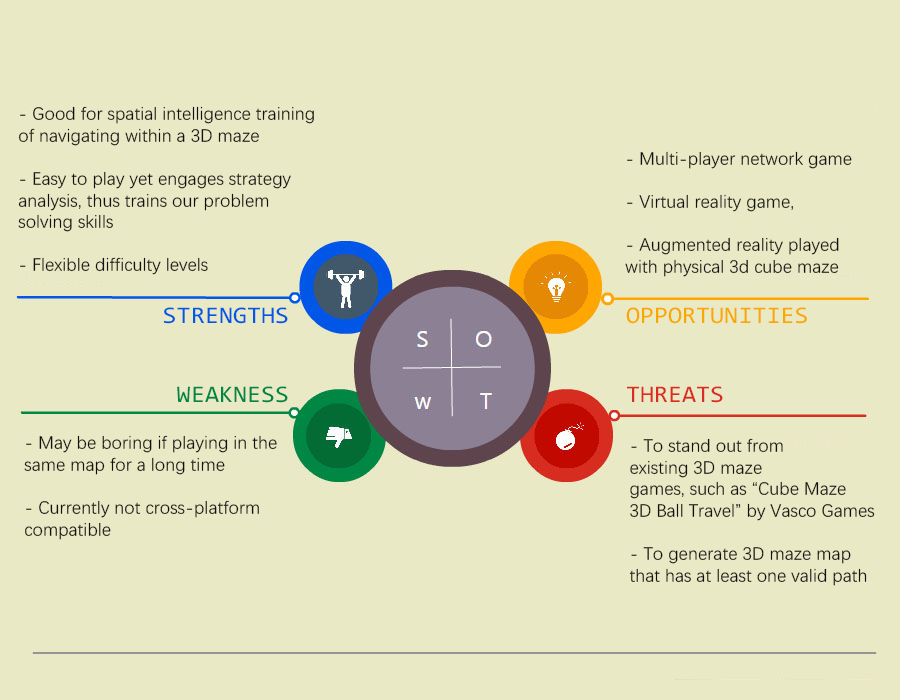
<style>
.page{position:relative;width:900px;height:700px;background:#e9e9c5}
.page>*{position:absolute;margin:0}
.t1{font:18px "DengXian-Regular";color:#111111}
.t2{font:24px "Consolas";color:#0058e7;scale:1.06 1}
.t3{font:24px "Consolas";color:#f9a800;scale:1.06 1}
.t4{font:24px "Consolas";color:#008745;scale:1.06 1}
.t5{font:24px "Consolas";color:#dc2b21;scale:1.06 1}
</style>
<div class="page">
<p class="t1" style="left:18px;top:106px;width:296px;height:169px">- Good for spatial intelligence training<br>of navigating within a 3D maze<br><br>- Easy to play yet engages strategy <br>analysis, thus trains our problem <br>solving skills<br><br>- Flexible difficulty levels</p>
<p class="t1" style="left:625px;top:151px;width:227px;height:126px">- Multi-player network game<br><br>- Virtual reality game,<br><br>- Augmented reality played <br>with physical 3d cube maze</p>
<p class="t2" style="left:164px;top:307px;width:124px;height:17px">STRENGTHS</p>
<p class="t3" style="left:626px;top:307px;width:181px;height:17px">OPPORTUNITIES</p>
<p class="t4" style="left:177px;top:386px;width:111px;height:17px">WEAKNESS</p>
<p class="t5" style="left:627px;top:386px;width:96px;height:17px">THREATS</p>
<p class="t1" style="left:24px;top:435px;width:253px;height:105px">- May be boring if playing in the<br>same map for a long time<br><br>- Currently not cross-platform<br>compatible</p>
<p class="t1" style="left:629px;top:438px;width:246px;height:148px">- To stand out from <br>existing 3D maze <br>games, such as “Cube Maze <br>3D Ball Travel” by Vasco Games<br><br>- To generate 3D maze map <br>that has at least one valid path</p>
</div>
